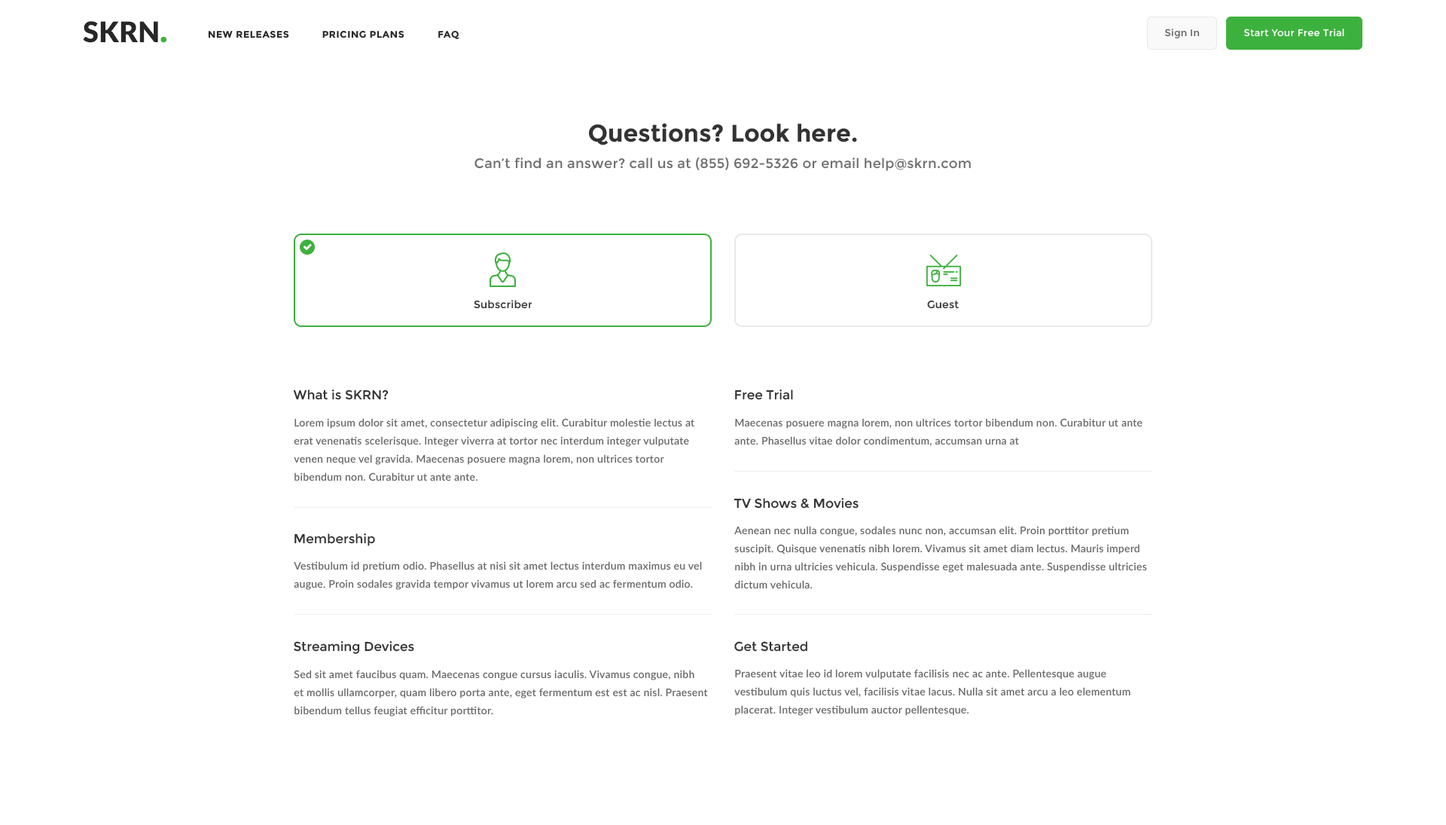
<style>
.page{position:relative;width:1446px;height:825px;background:#ffffff}
.page>*{position:absolute;margin:0}
.t1{font:28.4px "Lato-Black";color:#272727}
.t2{font:33.1px "Lato-Black";color:#3db13d}
.t3{font:9.8px "Montserrat-Regular";letter-spacing:0.02em;color:#666666}
.t4{font:9.8px "Montserrat-Regular";letter-spacing:0.02em;color:#ffffff}
.t5{font:9.5px "Montserrat-Bold";letter-spacing:0.05em;color:#272727;text-transform:uppercase}
.t6{font:24.1px "Montserrat-Bold";color:#333333}
.t7{font:13.6px "Montserrat-Regular";letter-spacing:0.017em;color:#707070}
.t8{font:10.5px "Montserrat-Regular";letter-spacing:0.017em;color:#333333}
.t9{font:12.8px "Montserrat-Regular";color:#333333}
.t10{font:10.5px/18.1px "Lato-Semibold";letter-spacing:0.017em;color:#666666}
</style>
<div class="page">
<p class="t1" style="left:83px;top:21px;width:84px;height:22px">SKRN<span class="t2">.</span></p>
<p class="t3" style="left:1165px;top:29px;width:35px;height:9px">Sign In</p>
<p class="t4" style="left:1244px;top:29px;width:100px;height:8px">Start Your Free Trial</p>
<p class="t5" style="left:208px;top:30px;width:81px;height:8px">new releases</p>
<p class="t5" style="left:322px;top:30px;width:82px;height:8px">pricing plans</p>
<p class="t5" style="left:438px;top:30px;width:21px;height:9px">faq</p>
<p class="t6" style="left:589px;top:123px;width:268px;height:22px">Questions? Look here.</p>
<p class="t7" style="left:474px;top:157px;width:497px;height:14px">Can’t find an answer? call us at (855) 692-5326 or email help@skrn.com</p>
<p class="t8" style="left:474px;top:300px;width:58px;height:9px">Subscriber</p>
<p class="t8" style="left:927px;top:300px;width:32px;height:9px">Guest</p>
<p class="t9" style="left:293px;top:389px;width:96px;height:11px">What is SKRN?</p>
<p class="t9" style="left:735px;top:389px;width:58px;height:11px">Free Trial</p>
<p class="t10" style="left:294px;top:418px;width:400px;height:63px">Lorem ipsum dolor sit amet, consectetur adipiscing elit. Curabitur molestie lectus at erat venenatis scelerisque. Integer viverra at tortor nec interdum integer vulputate venen neque vel gravida. Maecenas posuere magna lorem, non ultrices tortor <br>bibendum non. Curabitur ut ante ante.</p>
<p class="t10" style="left:734px;top:418px;width:408px;height:28px">Maecenas posuere magna lorem, non ultrices tortor bibendum non. Curabitur ut ante ante. Phasellus vitae dolor condimentum, accumsan urna at</p>
<p class="t9" style="left:734px;top:498px;width:125px;height:10px">TV Shows &amp; Movies</p>
<p class="t9" style="left:294px;top:533px;width:81px;height:13px">Membership</p>
<p class="t10" style="left:734px;top:526px;width:413px;height:63px">Aenean nec nulla congue, sodales nunc non, accumsan elit. Proin porttitor pretium suscipit. Quisque venenatis nibh lorem. Vivamus sit amet diam lectus. Mauris imperd nibh in urna ultricies vehicula. Suspendisse eget malesuada ante. Suspendisse ultricies dictum vehicula.</p>
<p class="t10" style="left:294px;top:561px;width:408px;height:29px">Vestibulum id pretium odio. Phasellus at nisi sit amet lectus interdum maximus eu vel augue. Proin sodales gravida tempor vivamus ut lorem arcu sed ac fermentum odio.</p>
<p class="t9" style="left:294px;top:641px;width:120px;height:13px">Streaming Devices</p>
<p class="t9" style="left:734px;top:641px;width:73px;height:10px">Get Started</p>
<p class="t10" style="left:294px;top:670px;width:414px;height:46px">Sed sit amet faucibus quam. Maecenas congue cursus iaculis. Vivamus congue, nibh <br>et mollis ullamcorper, quam libero porta ante, eget fermentum est est ac nisl. Praesent bibendum tellus feugiat efficitur porttitor.</p>
<p class="t10" style="left:734px;top:669px;width:396px;height:46px">Praesent vitae leo id lorem vulputate facilisis nec ac ante. Pellentesque augue <br>vestibulum quis luctus vel, facilisis vitae lacus. Nulla sit amet arcu a leo elementum placerat. Integer vestibulum auctor pellentesque.</p>
</div>
